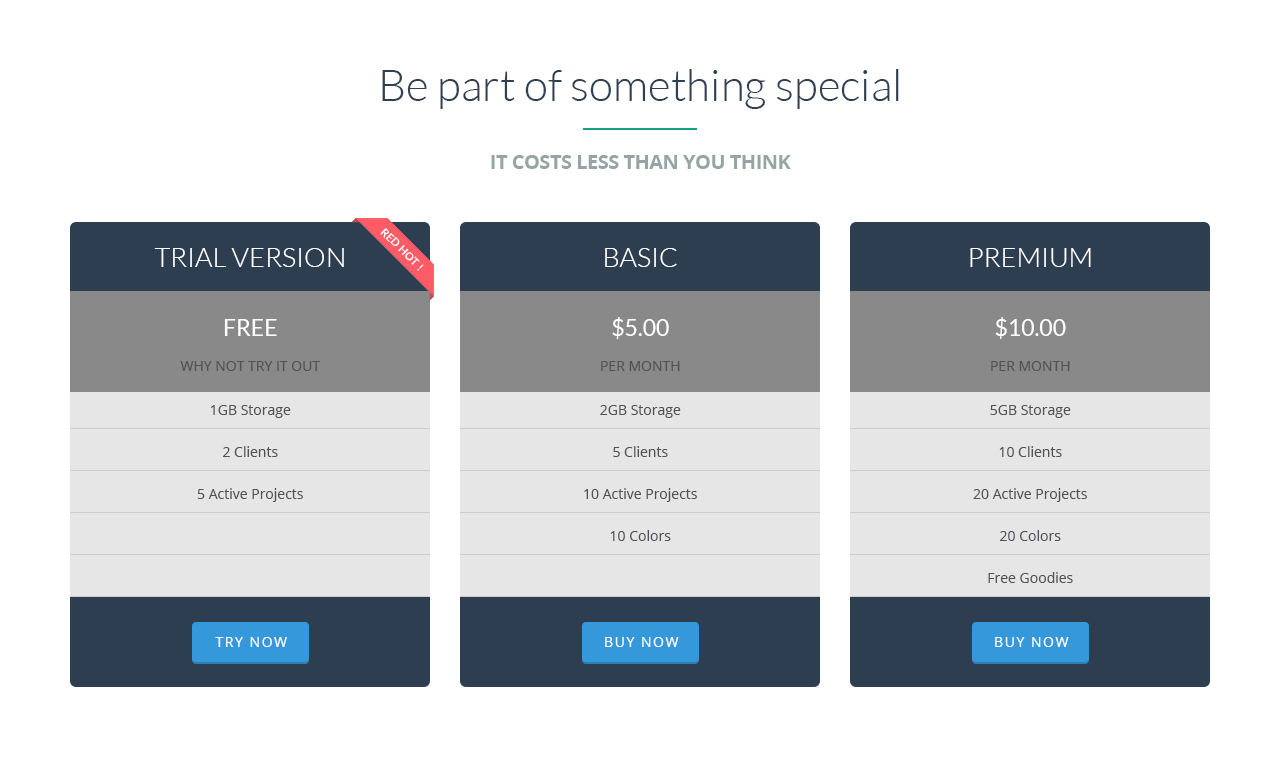
<style>
.page{position:relative;width:1280px;height:767px;background:#ffffff}
.page>*{position:absolute;margin:0}
.t1{font:44px "Lato-Light";color:#2e4052}
.t2{font:20px "OpenSans-Bold";letter-spacing:-0.025em;color:#95a5a6}
.t3{font:11px "Lato-Bold";letter-spacing:0.025em;color:#ffffff}
.t4{font:27px "Lato-Light";color:#ffffff}
.t5{font:14px/35px "OpenSans";color:#515157}
.t6{font:23px/35px "Lato-Regular";color:#ffffff}
.t7{font:14px/42px "OpenSans";color:#515157}
.t8{font:14px "OpenSans";letter-spacing:0.11em;color:#ffffff}
</style>
<div class="page">
<p class="t1" style="left:382px;top:69px;width:517px;height:40px">Be part of something special</p>
<p class="t2" style="left:491px;top:155px;width:300px;height:14px">IT COSTS LESS THAN YOU THINK</p>
<p class="t3" style="left:380px;top:228px;width:44px;height:43px;rotate:45deg">RED HOT !</p>
<p class="t4" style="left:154px;top:248px;width:190px;height:19px">TRIAL VERSION</p>
<p class="t4" style="left:605px;top:248px;width:72px;height:19px">BASIC</p>
<p class="t4" style="left:970px;top:248px;width:121px;height:19px">PREMIUM</p>
<p class="t5" style="left:601px;top:317px;width:79px;height:54px;text-align:center"><span class="t6">$5.00<br></span>PER MONTH</p>
<p class="t5" style="left:991px;top:317px;width:79px;height:54px;text-align:center"><span class="t6">$10.00<br></span>PER MONTH</p>
<p class="t7" style="left:197px;top:405px;width:106px;height:97px;text-align:center">1GB Storage<br>2 Clients<br>5 Active Projects</p>
<p class="t7" style="left:584px;top:405px;width:113px;height:136px;text-align:center">2GB Storage<br>5 Clients<br>10 Active Projects<br>10 Colors</p>
<p class="t7" style="left:973px;top:405px;width:114px;height:178px;text-align:center">5GB Storage<br>10 Clients<br>20 Active Projects<br>20 Colors<br>Free Goodies</p>
<p class="t8" style="left:215px;top:637px;width:72px;height:10px">TRY NOW</p>
<p class="t8" style="left:605px;top:637px;width:74px;height:10px">BUY NOW</p>
<p class="t8" style="left:995px;top:637px;width:74px;height:10px">BUY NOW</p>
</div>
